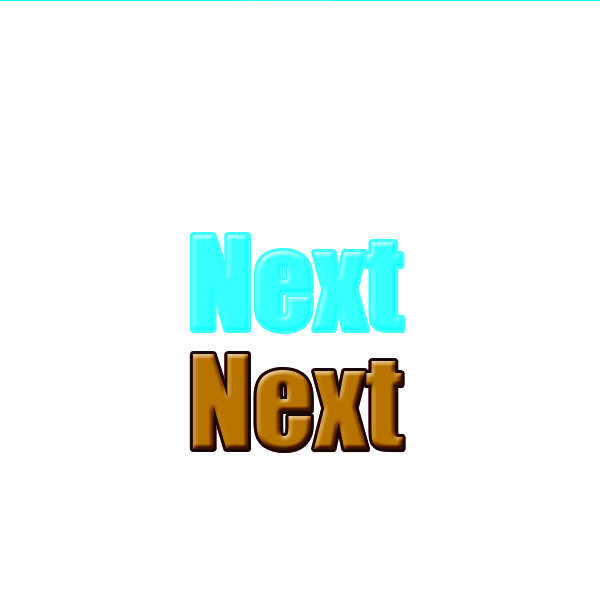
<style>
.page{position:relative;width:600px;height:600px;background:#ffffff}
.page>*{position:absolute;margin:0}
.t1{font:120px "Impact";color:#35ffff}
</style>
<div class="page">
<p class="t1" style="left:192px;top:234px;width:211px;height:96px">Next</p>
</div>
